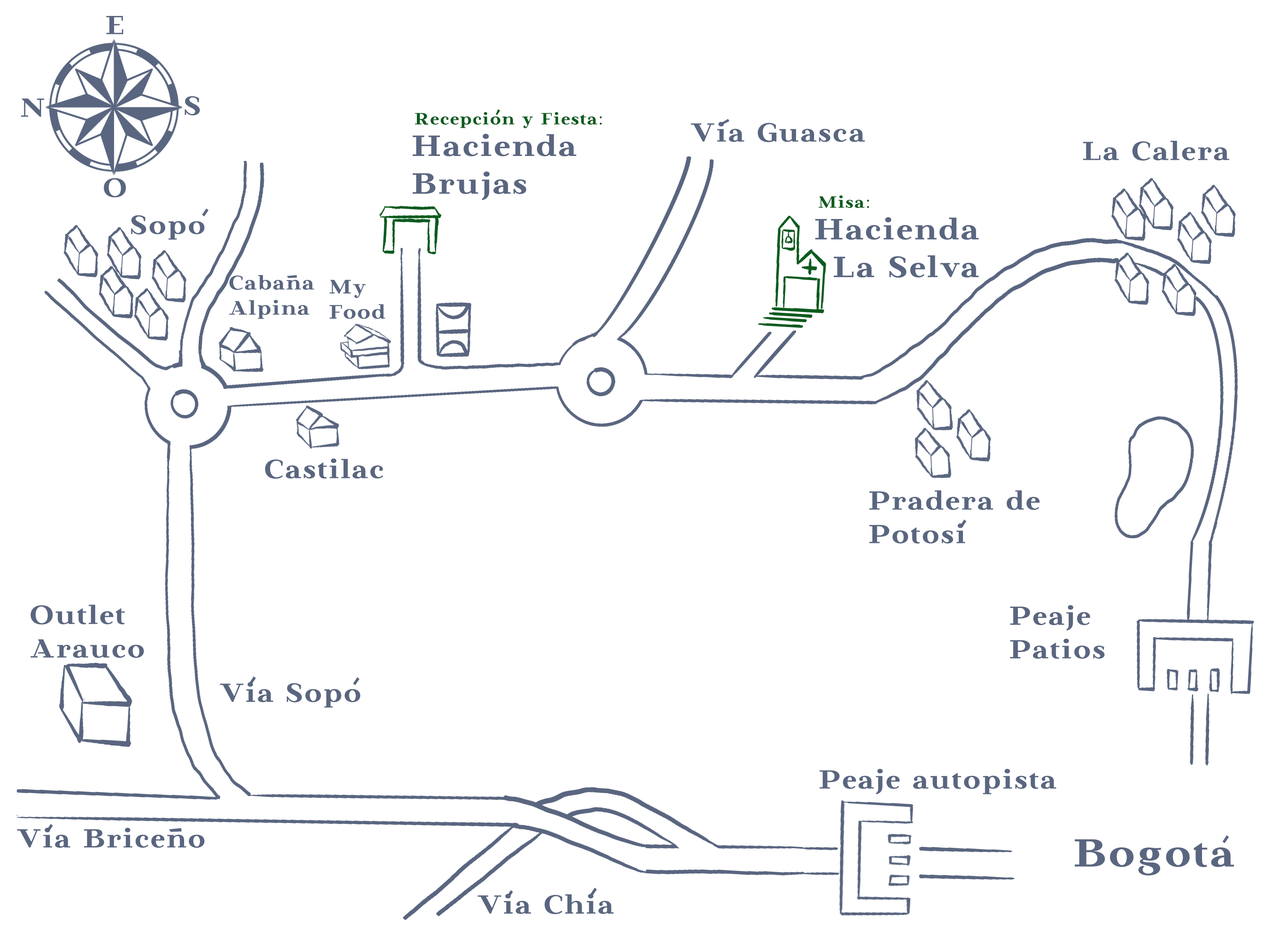
<style>
.page{position:relative;width:1275px;height:935px;background:#ffffff}
.page>*{position:absolute;margin:0}
.t1{font:28px "BeaumarisDemo-Regular";letter-spacing:0.05em;color:#5a6680}
.t2{font:17.5px "BeaumarisDemo-Regular";letter-spacing:0.05em;color:#0c5b1e}
.t3{font:17.5px "TimesNewRomanPSMT";letter-spacing:0.05em;color:#0c5b1e}
.t4{font:31.5px "BeaumarisDemo-Regular";letter-spacing:0.05em;color:#5a6680}
.t5{font:21px "BeaumarisDemo-Regular";letter-spacing:0.05em;color:#5a6680}
.t6{font:41.9px "BeaumarisDemo-Regular";letter-spacing:0.05em;color:#5a6680}
</style>
<div class="page">
<p class="t1" style="left:106px;top:16px;width:17px;height:18px">E</p>
<p class="t1" style="left:21px;top:99px;width:23px;height:18px">N</p>
<p class="t1" style="left:185px;top:96px;width:15px;height:20px">S</p>
<p class="t2" style="left:415px;top:112px;width:187px;height:16px">Recepcion y Fiesta<span class="t3">:</span></p>
<p class="t1" style="left:691px;top:122px;width:174px;height:20px">Via Guasca</p>
<p class="t4" style="left:413px;top:134px;width:163px;height:66px">Hacienda<br>Brujas</p>
<p class="t1" style="left:1083px;top:140px;width:146px;height:21px">La Calera</p>
<p class="t1" style="left:104px;top:178px;width:22px;height:20px">O</p>
<p class="t2" style="left:819px;top:195px;width:50px;height:13px">Misa<span class="t3">:</span></p>
<p class="t1" style="left:131px;top:215px;width:74px;height:25px">Sopo</p>
<p class="t4" style="left:815px;top:217px;width:164px;height:61px;text-align:right">Hacienda<br>La Selva</p>
<p class="t5" style="left:229px;top:275px;width:85px;height:44px">Cabana<br>Alpina</p>
<p class="t5" style="left:329px;top:280px;width:56px;height:39px">My<br>Food</p>
<p class="t1" style="left:265px;top:458px;width:118px;height:21px">Castilac</p>
<p class="t1" style="left:869px;top:490px;width:171px;height:54px">Pradera de<br>Potosi</p>
<p class="t1" style="left:31px;top:605px;width:113px;height:53px">Outlet<br>Arauco</p>
<p class="t1" style="left:1010px;top:605px;width:95px;height:54px">Peaje<br>Patios</p>
<p class="t1" style="left:220px;top:682px;width:140px;height:26px">Via Sopo</p>
<p class="t1" style="left:820px;top:769px;width:236px;height:26px">Peaje autopista</p>
<p class="t1" style="left:17px;top:828px;width:188px;height:20px">Via Briceno</p>
<p class="t6" style="left:1075px;top:839px;width:159px;height:37px">Bogota</p>
<p class="t1" style="left:478px;top:894px;width:136px;height:21px">Via Chia</p>
</div>
